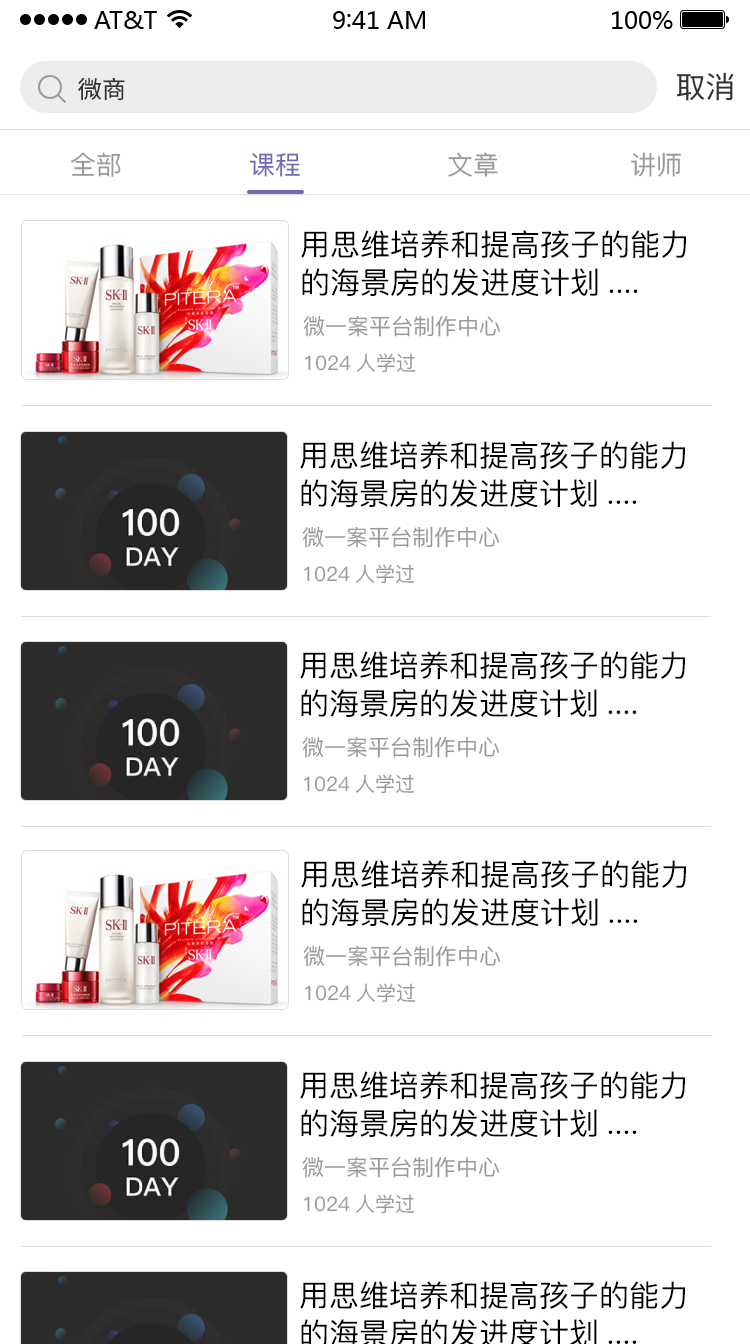
<style>
.page{position:relative;width:750px;height:1344px;background:#ffffff}
.page>*{position:absolute;margin:0}
.t1{font:24px "SourceHanSansCN-Regular";color:#333333}
.t2{font:30px "SourceHanSansCN-Regular";color:#333333}
.t3{font:26px "PingFang-SC-Medium";color:#999999}
.t4{font:26px "PingFang-SC-Medium";color:#6e6ab4}
.t5{font:30px/38px "PingFang-SC-Medium";color:#000000}
.t6{font:22px "PingFang-SC-Medium";color:#999999}
.t7{font:20px "PingFang-SC-Medium";color:#999999}
</style>
<div class="page">
<p class="t1" style="left:78px;top:77px;width:47px;height:24px">微商</p>
<p class="t2" style="left:676px;top:72px;width:58px;height:29px">取消</p>
<p class="t3" style="left:71px;top:152px;width:50px;height:25px">全部</p>
<p class="t4" style="left:249px;top:153px;width:51px;height:24px">课程</p>
<p class="t3" style="left:448px;top:152px;width:50px;height:25px">文章</p>
<p class="t3" style="left:631px;top:152px;width:50px;height:25px">讲师</p>
<p class="t5" style="left:301px;top:230px;width:386px;height:66px">用思维培养和提高孩子的能力<br>的海景房的发进度计划....</p>
<p class="t6" style="left:303px;top:315px;width:198px;height:22px">微一案平台制作中心</p>
<p class="t7" style="left:305px;top:353px;width:111px;height:20px">1024人学过</p>
<p class="t5" style="left:300px;top:441px;width:386px;height:66px">用思维培养和提高孩子的能力<br>的海景房的发进度计划....</p>
<p class="t6" style="left:302px;top:526px;width:198px;height:22px">微一案平台制作中心</p>
<p class="t7" style="left:304px;top:564px;width:111px;height:20px">1024人学过</p>
<p class="t5" style="left:300px;top:651px;width:386px;height:66px">用思维培养和提高孩子的能力<br>的海景房的发进度计划....</p>
<p class="t6" style="left:302px;top:736px;width:198px;height:22px">微一案平台制作中心</p>
<p class="t7" style="left:304px;top:774px;width:111px;height:20px">1024人学过</p>
<p class="t5" style="left:301px;top:860px;width:386px;height:66px">用思维培养和提高孩子的能力<br>的海景房的发进度计划....</p>
<p class="t6" style="left:303px;top:945px;width:198px;height:22px">微一案平台制作中心</p>
<p class="t7" style="left:305px;top:983px;width:111px;height:20px">1024人学过</p>
<p class="t5" style="left:300px;top:1071px;width:386px;height:66px">用思维培养和提高孩子的能力<br>的海景房的发进度计划....</p>
<p class="t6" style="left:302px;top:1156px;width:198px;height:22px">微一案平台制作中心</p>
<p class="t7" style="left:304px;top:1194px;width:111px;height:20px">1024人学过</p>
</div>
